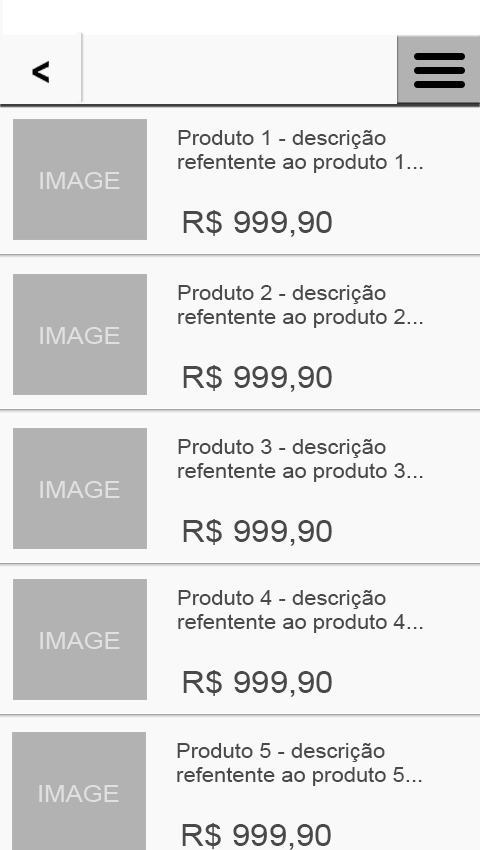
<style>
.page{position:relative;width:480px;height:850px;background:#f9f9f9}
.page>*{position:absolute;margin:0}
.t1{font:20px "ArialMT";color:#494949;scale:1.1 1}
.t2{font:30px "ArialMT";color:#494949;scale:1.1 1}
</style>
<div class="page">
<p class="t1" style="left:178px;top:130px;width:245px;height:43px">Produto 1 - descrição<br>refentente ao produto 1...</p>
<p class="t2" style="left:183px;top:210px;width:149px;height:27px">R$ 999,90</p>
<p class="t1" style="left:178px;top:285px;width:245px;height:43px">Produto 2 - descrição<br>refentente ao produto 2...</p>
<p class="t2" style="left:183px;top:365px;width:149px;height:27px">R$ 999,90</p>
<p class="t1" style="left:178px;top:439px;width:245px;height:43px">Produto 3 - descrição<br>refentente ao produto 3...</p>
<p class="t2" style="left:183px;top:519px;width:149px;height:27px">R$ 999,90</p>
<p class="t1" style="left:178px;top:590px;width:245px;height:43px">Produto 4 - descrição<br>refentente ao produto 4...</p>
<p class="t2" style="left:183px;top:670px;width:149px;height:27px">R$ 999,90</p>
<p class="t1" style="left:177px;top:743px;width:245px;height:43px">Produto 5 - descrição<br>refentente ao produto 5...</p>
<p class="t2" style="left:182px;top:823px;width:149px;height:27px">R$ 999,90</p>
</div>
